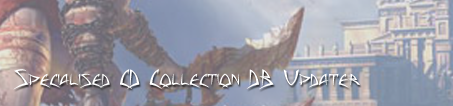
<style>
.page{position:relative;width:453px;height:106px}
.page>*{position:absolute;margin:0}
.t1{font:20px "Baphomet";color:#ffffff}
</style>
<div class="page">
<p class="t1" style="left:13px;top:69px;width:347px;height:21px">Specialised CD Collection DB Updater</p>
</div>
